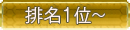
<style>
.page{position:relative;width:130px;height:30px}
.page>*{position:absolute;margin:0}
.t1{font:18px "GothicMB101Pr6N-Light";color:#fff1ec}
</style>
<div class="page">
<p class="t1" style="left:25px;top:6px;width:80px;height:18px">排名1位~</p>
</div>
